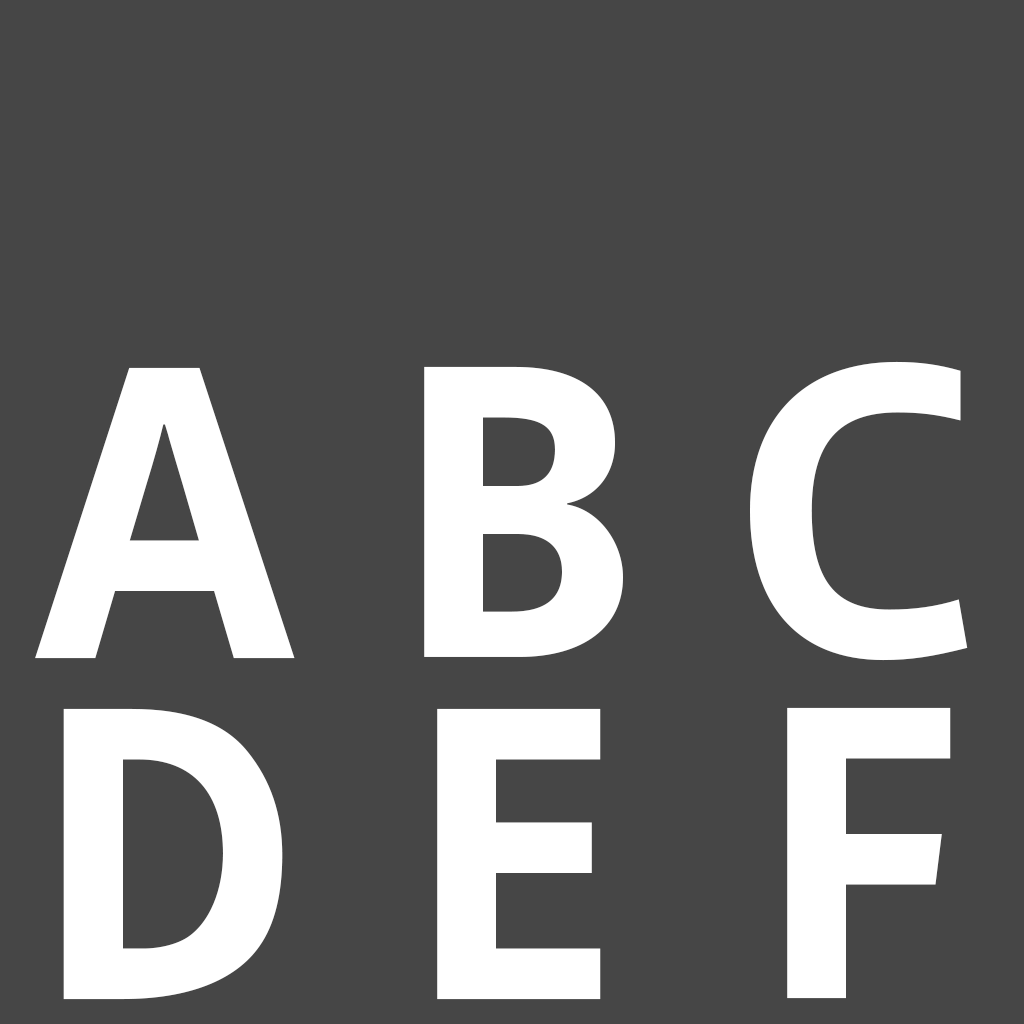
<style>
.page{position:relative;width:1024px;height:1024px;background:#464646}
.page>*{position:absolute;margin:0}
.t1{font:420px "SemikolonPlus-Bold";color:#ffffff}
</style>
<div class="page">
<p class="t1" style="left:424px;top:366px;width:199px;height:291px">B</p>
<p class="t1" style="left:750px;top:361px;width:218px;height:300px">C</p>
<p class="t1" style="left:35px;top:367px;width:260px;height:292px">A</p>
<p class="t1" style="left:63px;top:708px;width:220px;height:292px">D</p>
<p class="t1" style="left:437px;top:708px;width:164px;height:292px">E</p>
<p class="t1" style="left:787px;top:707px;width:164px;height:292px">F</p>
</div>
